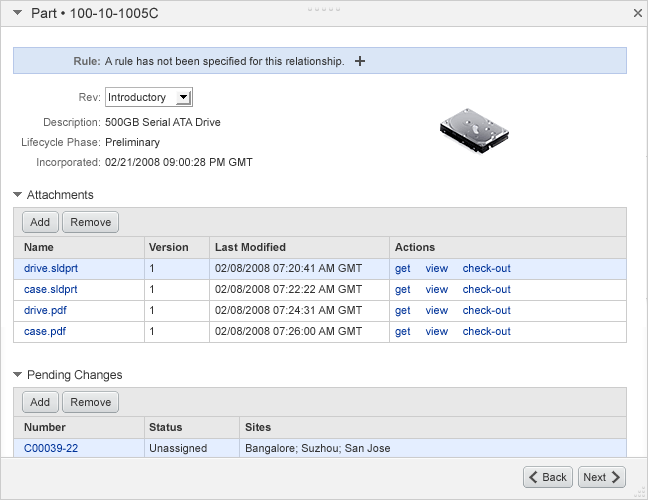
<style>
.page{position:relative;width:648px;height:500px;background:#ffffff}
.page>*{position:absolute;margin:0}
.t1{font:14px "ArialMT";color:#333333}
.t2{font:11px "Arial-BoldMT";color:#666666}
.t3{font:11px "ArialMT";color:#333333}
.t4{font:11px "ArialMT";color:#666666}
.t5{font:12px "ArialMT";color:#333333}
.t6{font:11px/21px "ArialMT";color:#003399}
.t7{font:11px/21px "Arial-BoldMT";color:#333333}
.t8{font:11px/21px "ArialMT";color:#333333}
</style>
<div class="page">
<p class="t1" style="left:32px;top:7px;width:126px;height:12px">Part • 100-10-1005C</p>
<p class="t2" style="left:74px;top:57px;width:26px;height:8px">Rule:</p>
<p class="t3" style="left:105px;top:57px;width:239px;height:11px">A rule has not been specified for this relationship.</p>
<p class="t4" style="left:79px;top:93px;width:21px;height:8px">Rev:</p>
<p class="t3" style="left:109px;top:93px;width:57px;height:11px">Introductory</p>
<p class="t4" style="left:44px;top:118px;width:56px;height:11px">Description:</p>
<p class="t3" style="left:105px;top:118px;width:116px;height:8px">500GB Serial ATA Drive</p>
<p class="t4" style="left:22px;top:138px;width:78px;height:11px">Lifecycle Phase:</p>
<p class="t3" style="left:106px;top:138px;width:54px;height:11px">Preliminary</p>
<p class="t4" style="left:37px;top:158px;width:63px;height:11px">Incorporated:</p>
<p class="t3" style="left:105px;top:158px;width:148px;height:8px">02/21/2008 09:00:28 PM GMT</p>
<p class="t5" style="left:27px;top:190px;width:67px;height:9px">Attachments</p>
<p class="t3" style="left:30px;top:218px;width:20px;height:8px">Add</p>
<p class="t3" style="left:71px;top:218px;width:40px;height:8px">Remove</p>
<p class="t6" style="left:24px;top:243px;width:54px;height:95px"><span class="t7">Name<br></span>drive.sldprt<br>case.sldprt<br>drive.pdf<br>case.pdf</p>
<p class="t7" style="left:149px;top:243px;width:39px;height:92px">Version<br><span class="t8">1<br>1<br>1<br>1</span></p>
<p class="t8" style="left:215px;top:243px;width:147px;height:92px"><span class="t7">Last Modified<br></span>02/08/2008 07:20:41 AM GMT<br>02/08/2008 07:22:22 AM GMT<br>02/08/2008 07:24:31 AM GMT<br>02/08/2008 07:26:00 AM GMT</p>
<p class="t6" style="left:395px;top:243px;width:116px;height:95px"><span class="t7">Actions<br></span>get     view     check-out<br>get     view     check-out<br>get     view     check-out<br>get     view     check-out</p>
<p class="t5" style="left:28px;top:370px;width:94px;height:12px">Pending Changes</p>
<p class="t3" style="left:30px;top:398px;width:20px;height:8px">Add</p>
<p class="t3" style="left:71px;top:398px;width:40px;height:8px">Remove</p>
<p class="t6" style="left:24px;top:423px;width:54px;height:29px"><span class="t7">Number<br></span>C00039-22</p>
<p class="t8" style="left:149px;top:423px;width:58px;height:32px"><span class="t7">Status<br></span>Unassigned</p>
<p class="t8" style="left:245px;top:423px;width:145px;height:32px"><span class="t7">Sites<br></span>Bangalore; Suzhou; San Jose</p>
<p class="t3" style="left:543px;top:473px;width:24px;height:8px">Back</p>
<p class="t3" style="left:584px;top:473px;width:22px;height:8px">Next</p>
</div>
